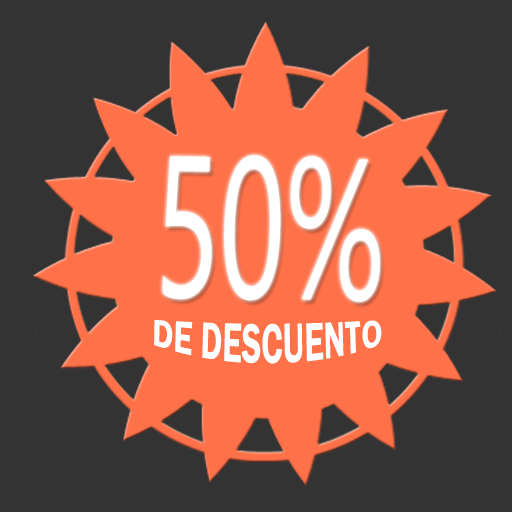
<style>
.page{position:relative;width:512px;height:512px;background:#333333}
.page>*{position:absolute;margin:0}
.t1{font:200px "Gadugi";color:#ffffff;scale:0.61 1}
.t2{font:143.6px "FrenchScriptMT";color:#ffffff;scale:0.61 1}
.t3{font:33.3px "FranklinGothic-Demi";color:#ffffff}
</style>
<div class="page">
<p class="t1" style="left:162px;top:155px;width:218px;height:147px;rotate:1deg">50%<span class="t2"> %%</span></p>
<p class="t3" style="left:154px;top:319px;width:228px;height:45px">DE DESCUENTO</p>
</div>
